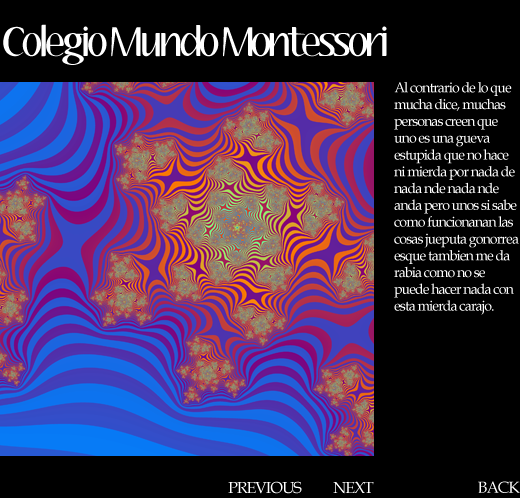
<style>
.page{position:relative;width:520px;height:498px;background:#000000}
.page>*{position:absolute;margin:0}
.t1{font:36px "Aubrey";letter-spacing:-0.06em;color:#ffffff}
.t2{font:14px "BookAntiqua";letter-spacing:-0.06em;color:#ffffff}
.t3{font:16px "BookAntiqua";letter-spacing:-0.06em;color:#ffffff}
</style>
<div class="page">
<p class="t1" style="left:3px;top:24px;width:384px;height:41px">Colegio Mundo Montessori</p>
<p class="t2" style="left:394px;top:82px;width:125px;height:233px">Al contrario de lo que mucha dice, muchas personas creen que uno es una gueva estupida que no hace ni mierda por nada de nada nde nada nde anda pero unos si sabe como funcionanan las cosas jueputa gonorrea esque tambien me da rabia como no se puede hacer nada con esta mierda carajo.</p>
<p class="t3" style="left:228px;top:481px;width:74px;height:13px">PREVIOUS</p>
<p class="t3" style="left:333px;top:481px;width:41px;height:13px">NEXT</p>
<p class="t3" style="left:478px;top:481px;width:42px;height:12px">BACK</p>
</div>
